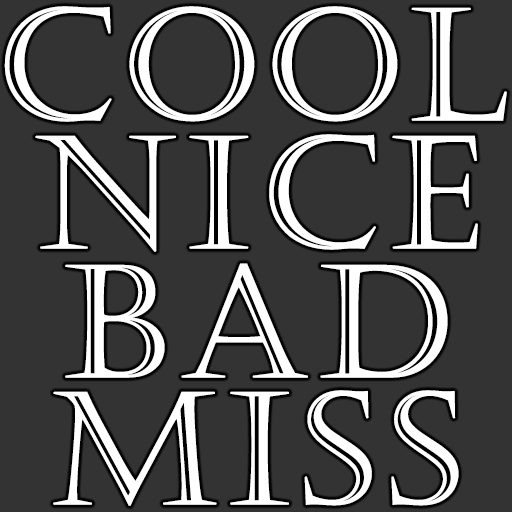
<style>
.page{position:relative;width:512px;height:512px;background:#333333}
.page>*{position:absolute;margin:0}
.t1{font:156px "Castellar";letter-spacing:0.025em;color:#ffffff;font-weight:bold}
.t2{font:156px "Castellar";letter-spacing:0.05em;color:#ffffff;font-weight:bold}
</style>
<div class="page">
<p class="t1" style="left:4px;top:6px;width:503px;height:116px">COOL</p>
<p class="t2" style="left:35px;top:134px;width:443px;height:118px">NICE</p>
<p class="t2" style="left:65px;top:263px;width:383px;height:115px">BAD</p>
<p class="t2" style="left:53px;top:390px;width:406px;height:116px">MISS</p>
</div>
